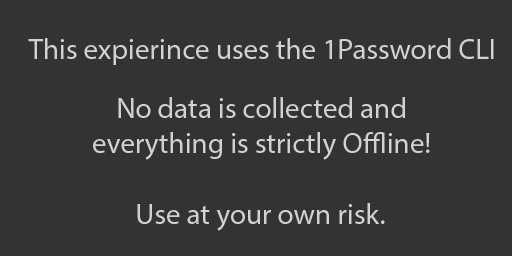
<style>
.page{position:relative;width:512px;height:256px;background:#333333}
.page>*{position:absolute;margin:0}
.t1{font:29.2px "MyriadPro-Regular";color:#d3d2d2}
</style>
<div class="page">
<p class="t1" style="left:28px;top:38px;width:466px;height:27px">This expierince uses the 1Password CLI</p>
<p class="t1" style="left:93px;top:97px;width:337px;height:63px;text-align:center">No data is collected and<br>everything is strictly Offline!</p>
<p class="t1" style="left:137px;top:203px;width:248px;height:28px">Use at your own risk.</p>
</div>
